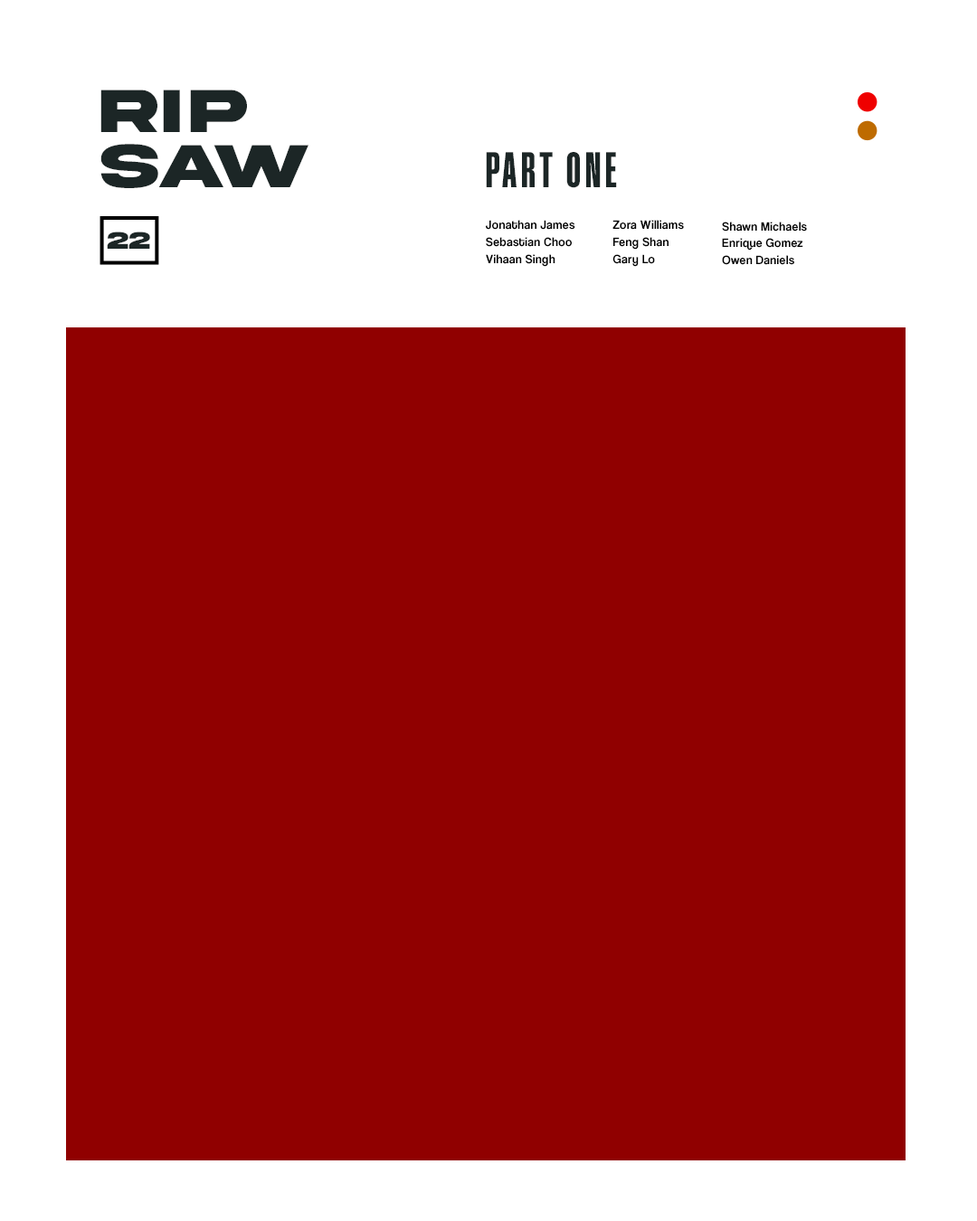
<style>
.page{position:relative;width:977px;height:1221px;background:#900000}
.page>*{position:absolute;margin:0}
.t1{font:64px/55.2px "AkiraExpanded-SuperBold";letter-spacing:0.025em;color:#1c2626;text-transform:uppercase}
.t2{font:52.8px "CoolveticaCompressedHv-Regular";letter-spacing:0.08em;color:#1c2626;text-transform:uppercase}
.t3{font:12.4px "CoolveticaRg-Regular";letter-spacing:0.025em;color:#000000}
.t4{font:24.9px "AkiraExpanded-SuperBold";letter-spacing:0.025em;color:#1c2626;text-transform:uppercase}
</style>
<div class="page">
<p class="t1" style="left:100px;top:90px;width:208px;height:98px">rip<br>saw</p>
<p class="t2" style="left:486px;top:152px;width:131px;height:36px">part one</p>
<p class="t3" style="left:486px;top:220px;width:89px;height:10px">Jonathan James</p>
<p class="t3" style="left:612px;top:220px;width:72px;height:10px">Zora Williams</p>
<p class="t3" style="left:722px;top:222px;width:85px;height:10px">Shawn Michaels</p>
<p class="t4" style="left:107px;top:232px;width:43px;height:17px">22</p>
<p class="t3" style="left:486px;top:237px;width:86px;height:10px">Sebastian Choo</p>
<p class="t3" style="left:613px;top:237px;width:55px;height:13px">Feng Shan</p>
<p class="t3" style="left:722px;top:238px;width:81px;height:13px">Enrique Gomez</p>
<p class="t3" style="left:486px;top:254px;width:69px;height:13px">Vihaan Singh</p>
<p class="t3" style="left:612px;top:254px;width:43px;height:13px">Gary Lo</p>
<p class="t3" style="left:722px;top:255px;width:72px;height:10px">Owen Daniels</p>
</div>
